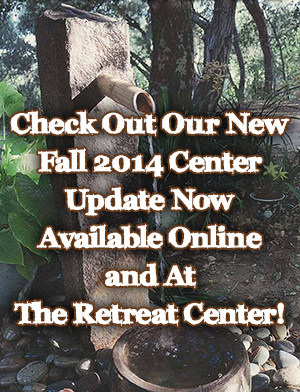
<style>
.page{position:relative;width:300px;height:392px}
.page>*{position:absolute;margin:0}
.t1{font:28px/38px "FFFTusj-Bold";color:#ffffff}
</style>
<div class="page">
<p class="t1" style="left:10px;top:110px;width:280px;height:217px;text-align:center">Check Out Our New Fall 2014 Center Update Now Available Online and At                    The Retreat Center!</p>
</div>
